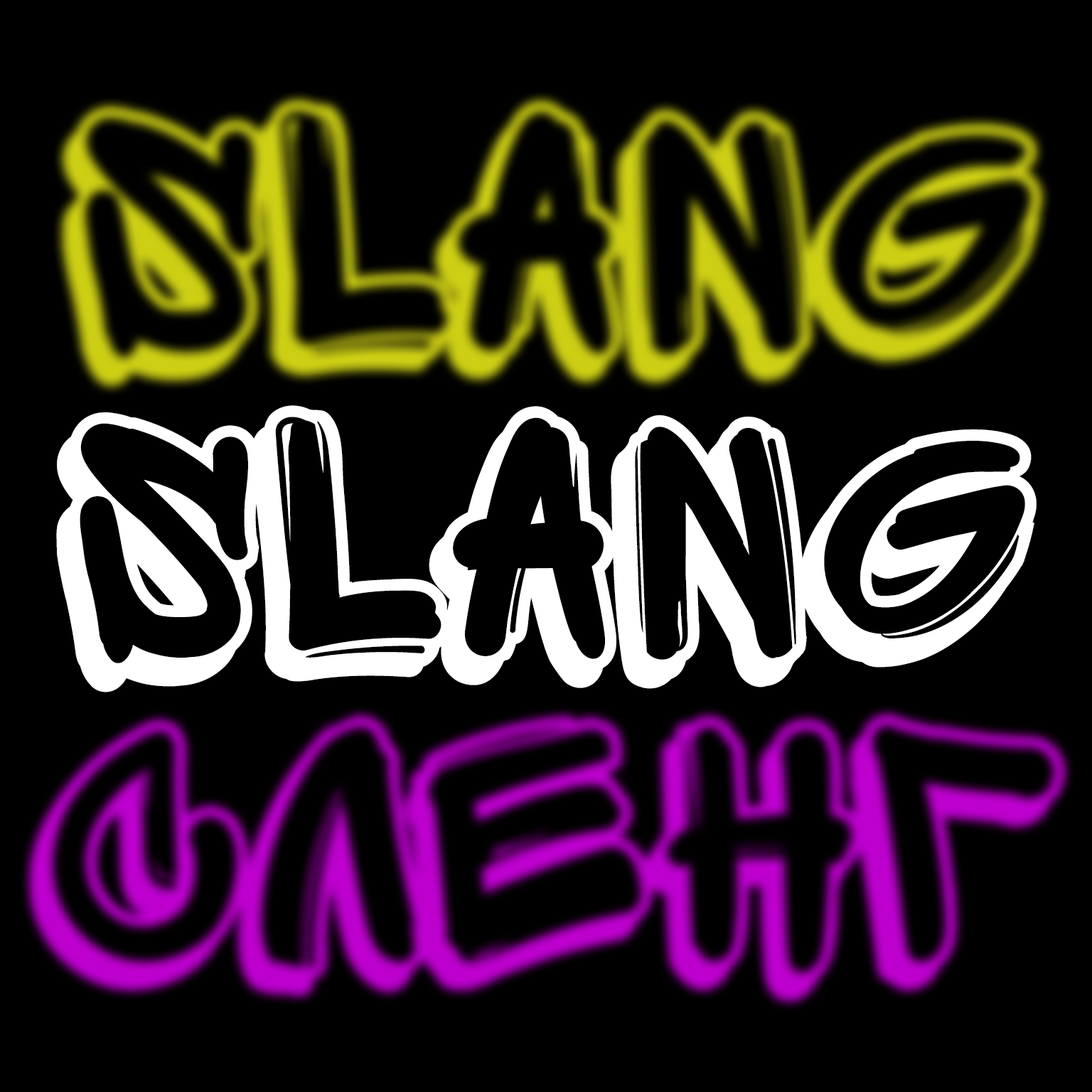
<style>
.page{position:relative;width:1092px;height:1092px;background:#000000}
.page>*{position:absolute;margin:0}
.t1{font:355.5px "SpriteGraffitiShadow";color:#ffffff}
</style>
<div class="page">
<p class="t1" style="left:56px;top:405px;width:981px;height:287px">SLANG</p>
</div>
